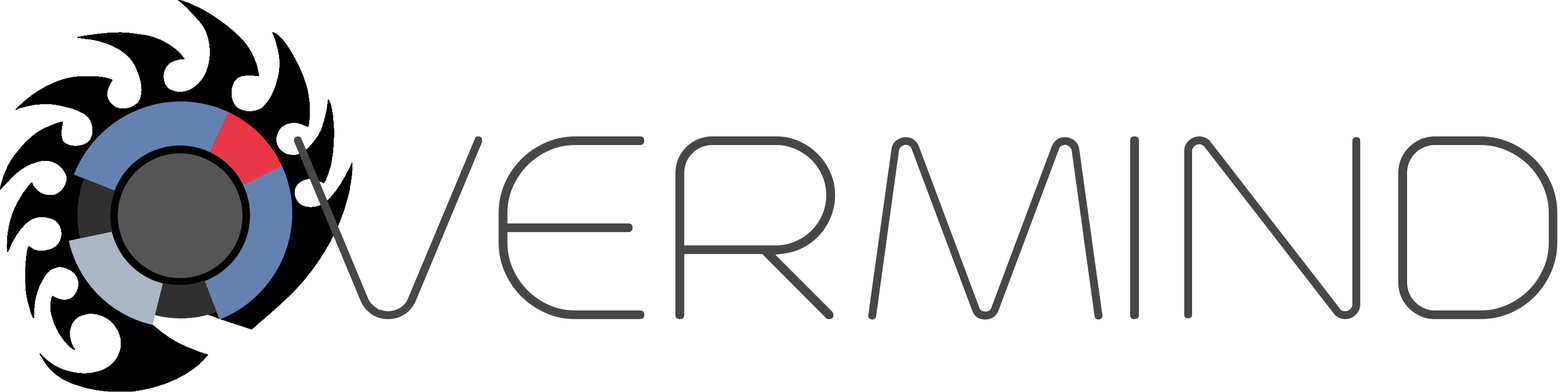
<style>
.page{position:relative;width:1568px;height:392px;background:#ffffff}
.page>*{position:absolute;margin:0}
.t1{font:326.7px "Trench-Thin";color:#474747}
</style>
<div class="page">
<p class="t1" style="left:294px;top:136px;width:1263px;height:183px">VERMIND</p>
</div>
